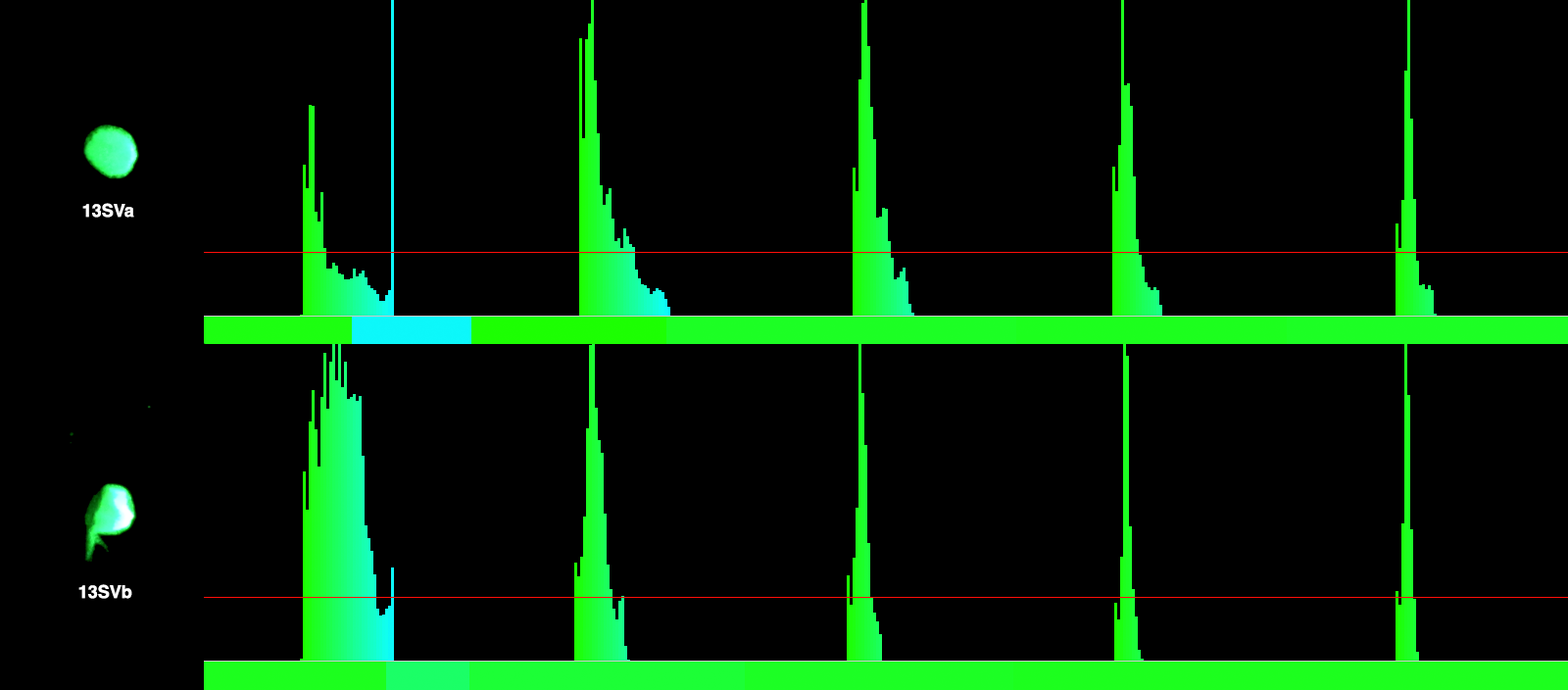
<style>
.page{position:relative;width:1568px;height:690px;background:#000000}
.page>*{position:absolute;margin:0}
.t1{font:17.6px "Helvetica-Bold";color:#ffffff}
</style>
<div class="page">
<p class="t1" style="left:82px;top:203px;width:52px;height:15px">13SVa</p>
<p class="t1" style="left:78px;top:584px;width:54px;height:15px">13SVb</p>
</div>
